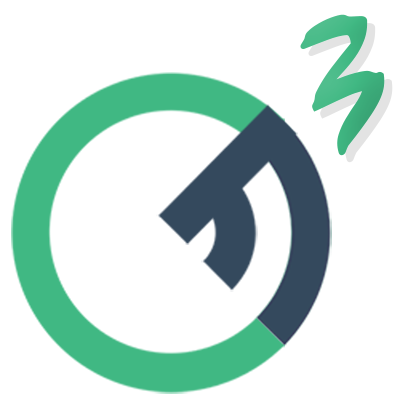
<style>
.page{position:relative;width:400px;height:400px;background:#ffffff}
.page>*{position:absolute;margin:0}
.t1{font:272px "NanumBrush";color:#40b883;font-weight:bold;font-style:italic}
</style>
<div class="page">
<p class="t1" style="left:300px;top:14px;width:85px;height:142px;rotate:-4deg">3</p>
</div>
